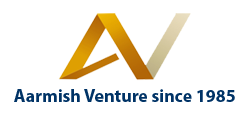
<style>
.page{position:relative;width:245px;height:119px;background:#ffffff}
.page>*{position:absolute;margin:0}
.t1{font:18px "MyriadPro-Bold";color:#003366}
</style>
<div class="page">
<p class="t1" style="left:14px;top:89px;width:221px;height:13px">Aarmish Venture since 1985</p>
</div>
